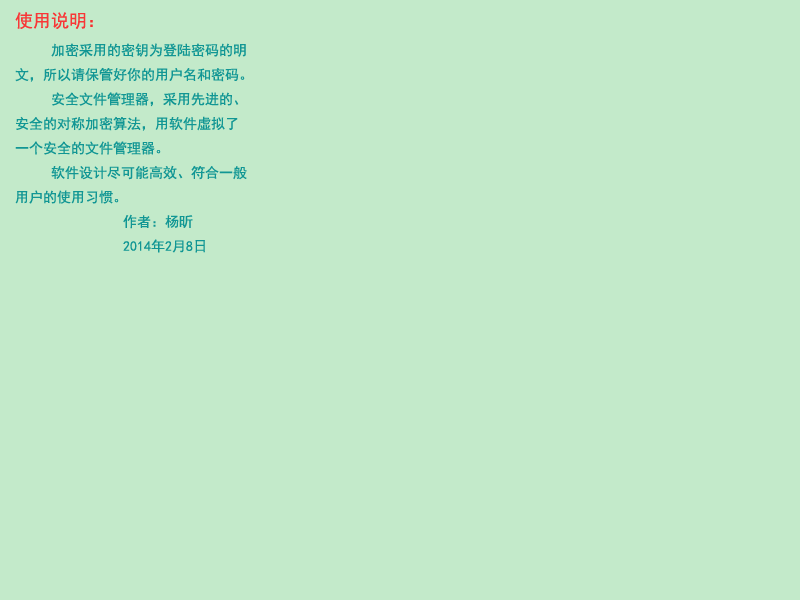
<style>
.page{position:relative;width:800px;height:600px;background:#c3eaca}
.page>*{position:absolute;margin:0}
.t1{font:14px "SimHei";color:#119694}
.t2{font:18px "SimHei";color:#f83737}
.t3{font:18px "SimHei";color:#f82d2d}
</style>
<div class="page">
<p class="t1" style="left:15px;top:12px;width:232px;height:241px"><span class="t2">使用说明</span><span class="t3">：<br></span> 加密采用的密钥为登陆密码的明<br>文，所以请保管好你的用户名和密码。<br> 安全文件管理器，采用先进的、<br>安全的对称加密算法，用软件虚拟了<br>一个安全的文件管理器。<br> 软件设计尽可能高效、符合一般<br>用户的使用习惯。<br>   作者：杨昕<br>   2014年2月8日</p>
</div>
